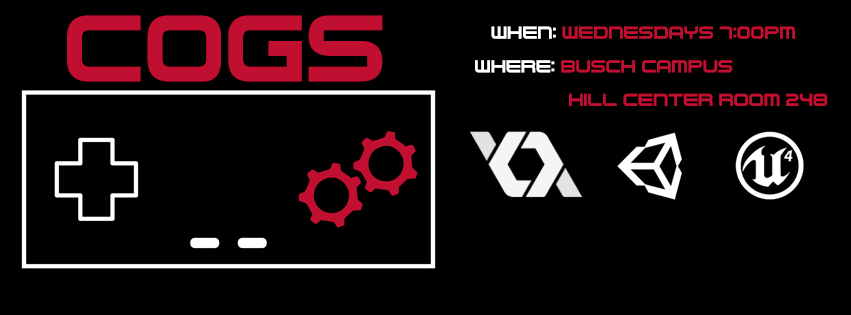
<style>
.page{position:relative;width:851px;height:315px;background:#000000}
.page>*{position:absolute;margin:0}
.t1{font:150px "NesController";color:#c00f30}
.t2{font:28px "NesController";color:#c00f30}
.t3{font:28px "NesController";color:#ffffff}
</style>
<div class="page">
<p class="t1" style="left:67px;top:15px;width:316px;height:67px">COGS</p>
<p class="t2" style="left:475px;top:26px;width:353px;height:80px"><span class="t3">   When:</span> Wednesdays 7:00pm<br><span class="t3">Where: </span>Busch Campus<br>      Hill Center Room 248</p>
</div>
